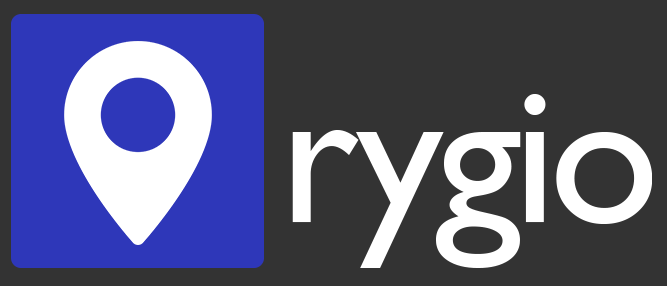
<style>
.page{position:relative;width:667px;height:286px;background:#333333}
.page>*{position:absolute;margin:0}
.t1{font:200px "GillSansMT";letter-spacing:-0.04em;color:#ffffff}
</style>
<div class="page">
<p class="t1" style="left:292px;top:94px;width:360px;height:174px">rygio</p>
</div>
